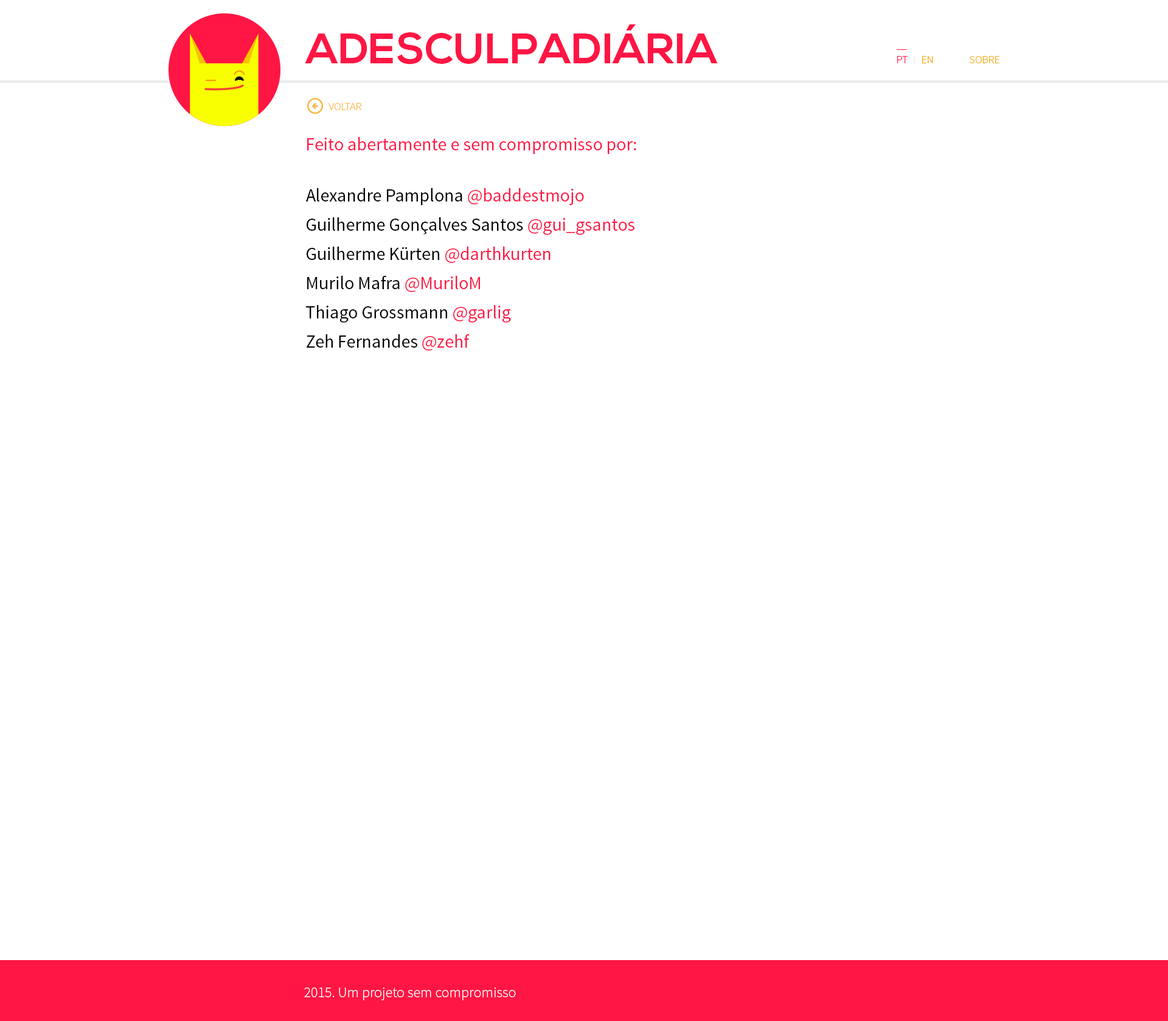
<style>
.page{position:relative;width:1168px;height:1021px;background:#ffffff}
.page>*{position:absolute;margin:0}
.t1{font:42.6px "NexaBold";color:#ff1644}
.t2{font:11px "SourceSansPro-Light";color:#ff1644}
.t3{font:11px "SourceSansPro-Light";color:#f8a900}
.t4{font:11px "SourceSansPro-Light";color:#f9b642}
.t5{font:18.3px "SourceSansPro-Regular";color:#ff1644}
.t6{font:18.3px/29.2px "SourceSansPro-Regular";color:#000000}
.t7{font:18.3px/29.2px "SourceSansPro-Regular";color:#ff1644}
.t8{font:14.6px "SourceSansPro-Light";color:#ffffff}
</style>
<div class="page">
<p class="t1" style="left:305px;top:24px;width:413px;height:41px">ADESCULPADIÁRIA</p>
<p class="t2" style="left:898px;top:56px;width:10px;height:7px">PT</p>
<p class="t3" style="left:923px;top:56px;width:11px;height:7px">EN</p>
<p class="t3" style="left:970px;top:56px;width:30px;height:7px">SOBRE</p>
<p class="t4" style="left:329px;top:103px;width:33px;height:7px">VOLTAR</p>
<p class="t5" style="left:307px;top:137px;width:330px;height:17px">Feito abertamente e sem compromisso por:</p>
<p class="t6" style="left:306px;top:188px;width:329px;height:163px;text-align:justify">Alexandre Pamplona <span class="t7">@baddestmojo<br></span>Guilherme Gonçalves Santos <span class="t7">@gui_gsantos <br></span>Guilherme Kürten <span class="t7">@darthkurten <br></span>Murilo Mafra <span class="t7">@MuriloM<br></span>Thiago Grossmann <span class="t7">@garlig<br></span>Zeh Fernandes <span class="t7">@zehf</span></p>
<p class="t8" style="left:304px;top:986px;width:212px;height:14px">2015. Um projeto sem compromisso</p>
</div>
